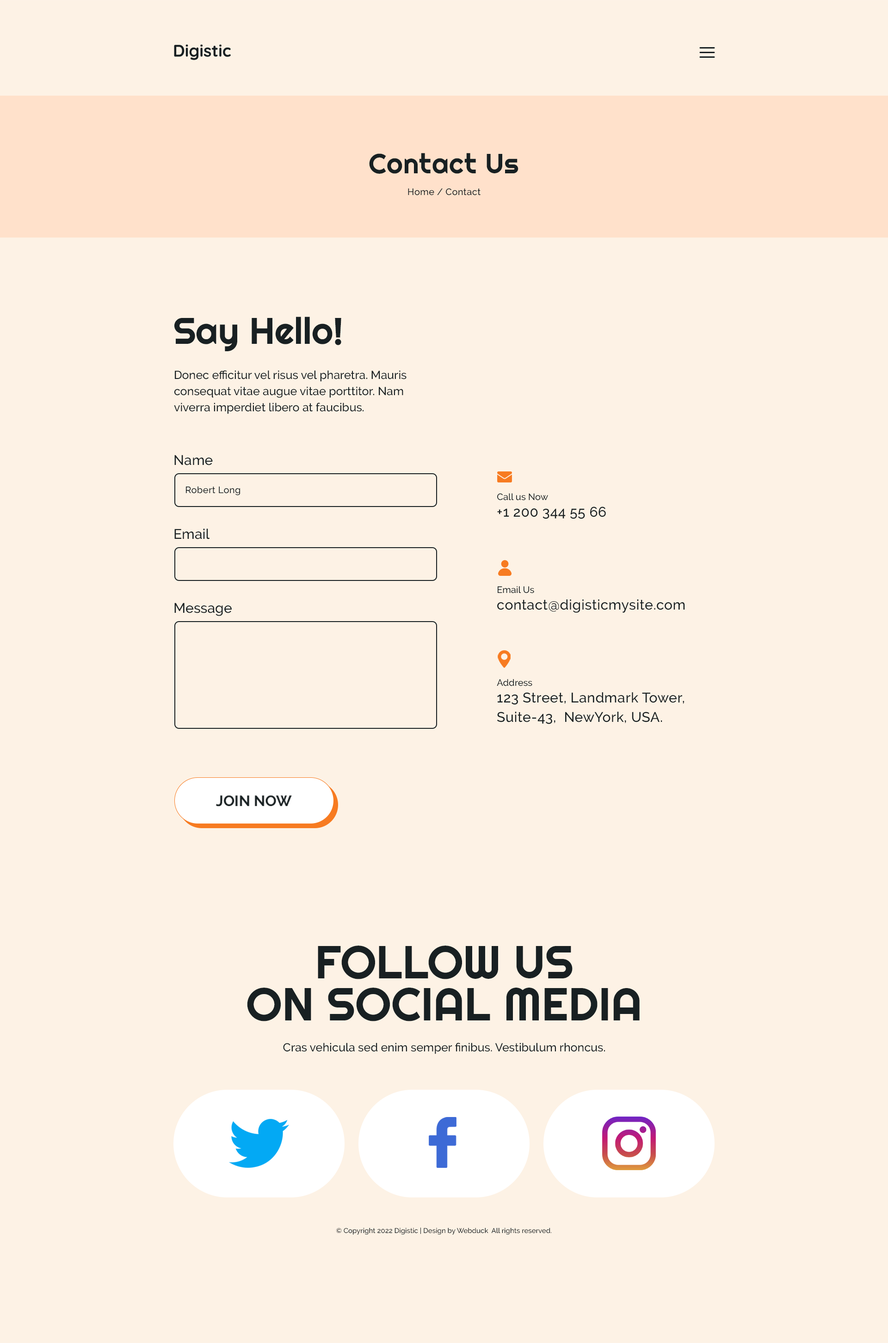
<style>
.page{position:relative;width:888px;height:1343px;background:#fdf2e5}
.page>*{position:absolute;margin:0}
.t1{font:27.7px "Righteous-Regular";letter-spacing:0.02em;color:#182022}
.t2{font:9.2px "Raleway-Medium";letter-spacing:0.02em;color:#182022}
.t3{font:37px "Righteous-Regular";color:#182022}
.t4{font:11.6px/16.2px "Raleway-Medium";color:#182022}
.t5{font:13.9px "Raleway-Medium";color:#182022}
.t6{font:9.2px "Raleway-Medium";color:#182022}
.t7{font:13.9px "Raleway-Medium";letter-spacing:0.02em;color:#182022}
.t8{font:13.9px/19.4px "Raleway-Medium";letter-spacing:0.02em;color:#182022}
.t9{font:15px "Raleway-Bold";color:#182022}
.t10{font:46.2px/42.1px "Righteous-Regular";color:#182022;text-transform:uppercase}
.t11{font:11.6px "Raleway-Medium";color:#182022}
.t12{font:6.9px "Raleway-Medium";color:#182022}
</style>
<div class="page">
<p class="t1" style="left:369px;top:153px;width:149px;height:21px">Contact Us</p>
<p class="t2" style="left:408px;top:188px;width:72px;height:8px">Home / Contact</p>
<p class="t3" style="left:174px;top:317px;width:167px;height:34px">Say Hello!</p>
<p class="t4" style="left:174px;top:370px;width:232px;height:44px">Donec efficitur vel risus vel pharetra. Mauris consequat vitae augue vitae porttitor. Nam viverra imperdiet libero at faucibus.</p>
<p class="t5" style="left:174px;top:455px;width:39px;height:11px">Name</p>
<p class="t2" style="left:186px;top:486px;width:54px;height:10px">Robert Long</p>
<p class="t6" style="left:497px;top:493px;width:51px;height:8px">Call us Now</p>
<p class="t7" style="left:497px;top:507px;width:109px;height:12px">+1 200 344 55 66</p>
<p class="t5" style="left:174px;top:529px;width:36px;height:10px">Email</p>
<p class="t6" style="left:497px;top:586px;width:37px;height:8px">Email Us</p>
<p class="t5" style="left:174px;top:603px;width:58px;height:13px">Message</p>
<p class="t7" style="left:497px;top:600px;width:188px;height:13px">contact@digisticmysite.com</p>
<p class="t6" style="left:497px;top:679px;width:35px;height:8px">Address</p>
<p class="t8" style="left:497px;top:693px;width:187px;height:31px">123 Street, Landmark Tower,<br>Suite-43,  NewYork, USA.</p>
<p class="t9" style="left:215px;top:796px;width:77px;height:11px">JOIN NOW</p>
<p class="t10" style="left:247px;top:946px;width:392px;height:76px;text-align:center">FOLLOW US<br>ON SOCIAL MEDIA</p>
<p class="t11" style="left:283px;top:1043px;width:322px;height:11px">Cras vehicula sed enim semper finibus. Vestibulum rhoncus.</p>
<p class="t12" style="left:336px;top:1228px;width:216px;height:7px">© Copyright 2022 Digistic | Design by Webduck  All rights reserved.</p>
</div>
